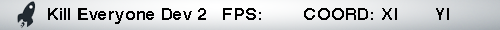
<style>
.page{position:relative;width:500px;height:30px}
.page>*{position:absolute;margin:0}
.t1{font:17px "Helvetica-Bold";letter-spacing:0.01em;color:#000000}
</style>
<div class="page">
<p class="t1" style="left:48px;top:8px;width:401px;height:16px">Kill Everyone Dev 2   FPS:        COORD: X|       Y|</p>
</div>
